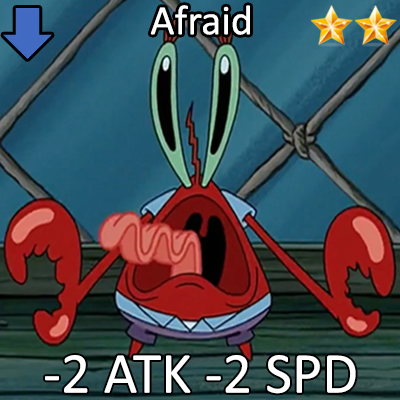
<style>
.page{position:relative;width:400px;height:400px}
.page>*{position:absolute;margin:0}
.t1{font:72px "Calibri";color:#ffffff}
.t2{font:100px "Calibri";color:#ffffff}
</style>
<div class="page">
<p class="t1" style="left:150px;top:5px;width:100px;height:30px">Afraid</p>
<p class="t2" style="left:45px;top:355px;width:311px;height:39px">-2 ATK -2 SPD</p>
</div>
